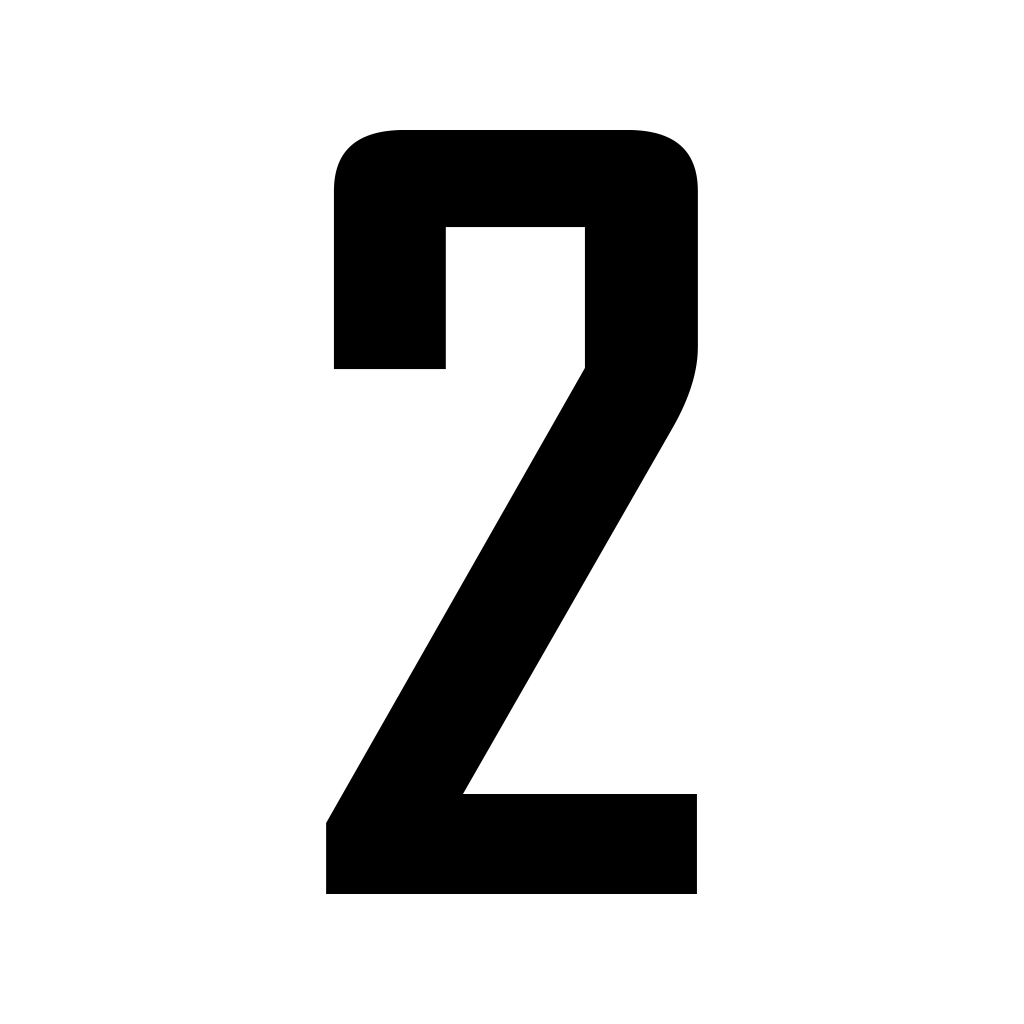
<style>
.page{position:relative;width:1024px;height:1024px;background:#ffffff}
.page>*{position:absolute;margin:0}
.t1{font:1000px "AgencyFB-Bold";color:#000000}
</style>
<div class="page">
<p class="t1" style="left:326px;top:130px;width:372px;height:764px">2</p>
</div>
